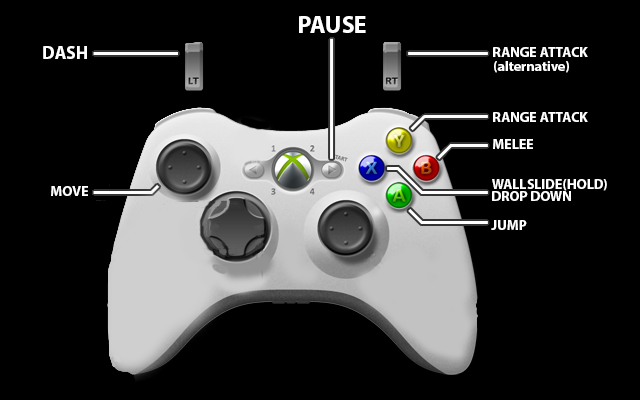
<style>
.page{position:relative;width:640px;height:400px;background:#000000}
.page>*{position:absolute;margin:0}
.t1{font:24px "MyriadPro-Bold";color:#ffffff}
.t2{font:18px "MyriadPro-Bold";color:#ffffff}
.t3{font:14px "MyriadPro-Bold";color:#ffffff}
</style>
<div class="page">
<p class="t1" style="left:299px;top:16px;width:67px;height:17px">PAUSE</p>
<p class="t2" style="left:43px;top:46px;width:44px;height:13px">DASH</p>
<p class="t3" style="left:493px;top:47px;width:95px;height:10px">RANGE ATTACK<br>a</p>
<p class="t3" style="left:494px;top:61px;width:75px;height:12px">(alternative)</p>
<p class="t3" style="left:493px;top:112px;width:95px;height:10px">RANGE ATTACK</p>
<p class="t3" style="left:493px;top:139px;width:40px;height:10px">MELEE</p>
<p class="t3" style="left:492px;top:179px;width:115px;height:12px">WALLSLIDE(HOLD)</p>
<p class="t3" style="left:51px;top:186px;width:37px;height:10px">MOVE</p>
<p class="t3" style="left:492px;top:191px;width:79px;height:10px">DROP DOWN</p>
<p class="t3" style="left:491px;top:220px;width:36px;height:10px">JUMP</p>
</div>
